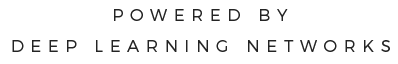
<style>
.page{position:relative;width:398px;height:64px;background:#ffffff}
.page>*{position:absolute;margin:0}
.t1{font:16.7px "Montserrat-Light";letter-spacing:0.4em;color:#242424}
</style>
<div class="page">
<p class="t1" style="left:114px;top:9px;width:174px;height:12px">POWERED BY</p>
<p class="t1" style="left:12px;top:40px;width:378px;height:12px">DEEP LEARNING NETWORKS</p>
</div>
